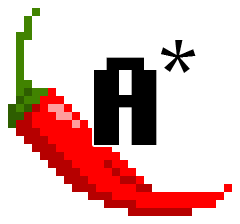
<style>
.page{position:relative;width:240px;height:224px;background:#ffffff}
.page>*{position:absolute;margin:0}
.t1{font:100px "Constantia";color:#000000}
.t2{font:100px "pixelmix-bold";color:#000000}
</style>
<div class="page">
<p class="t1" style="left:161px;top:40px;width:35px;height:33px">*</p>
<p class="t2" style="left:94px;top:57px;width:63px;height:88px">A</p>
</div>
